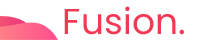
<style>
.page{position:relative;width:200px;height:40px;background:#ffffff}
.page>*{position:absolute;margin:0}
.t1{font:36px "Poppins-Regular";letter-spacing:0.005em;color:#f63854}
</style>
<div class="page">
<p class="t1" style="left:64px;top:6px;width:120px;height:29px">Fusion.</p>
</div>
